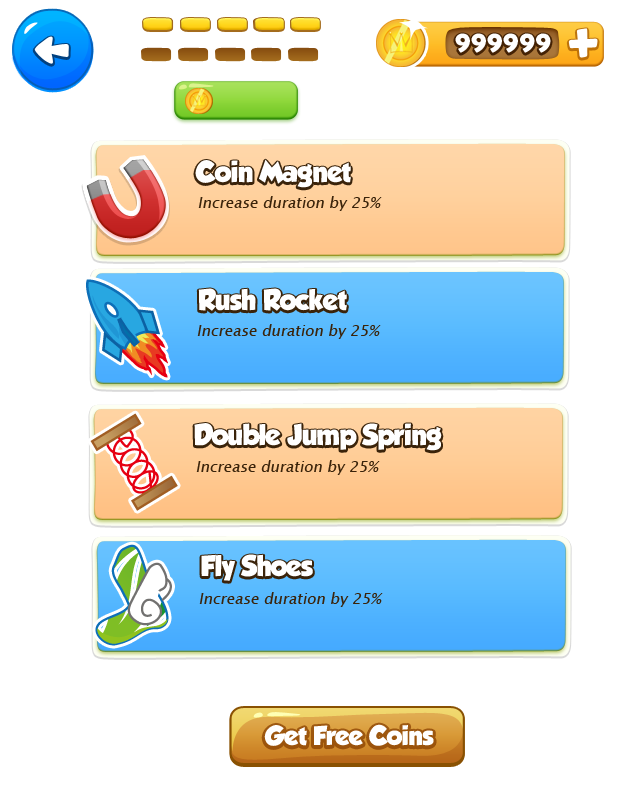
<style>
.page{position:relative;width:640px;height:800px;background:#ffffff}
.page>*{position:absolute;margin:0}
.t1{font:25px "Skranji-Bold";letter-spacing:0.025em;color:#ffffff}
.t2{font:26px "GROBOLD";letter-spacing:-0.02em;color:#ffffff}
.t3{font:15px "LucidaSansUnicode";color:#3a230a;font-style:italic}
.t4{font:24px "GROBOLD";letter-spacing:-0.02em;color:#ffffff}
</style>
<div class="page">
<p class="t1" style="left:455px;top:33px;width:96px;height:20px">999999</p>
<p class="t2" style="left:195px;top:159px;width:156px;height:29px">Coin Magnet</p>
<p class="t3" style="left:198px;top:196px;width:184px;height:15px">Increase duration by 25%</p>
<p class="t2" style="left:198px;top:288px;width:149px;height:23px">Rush Rocket</p>
<p class="t3" style="left:197px;top:324px;width:184px;height:15px">Increase duration by 25%</p>
<p class="t2" style="left:194px;top:423px;width:248px;height:28px">Double Jump Spring</p>
<p class="t3" style="left:196px;top:460px;width:184px;height:15px">Increase duration by 25%</p>
<p class="t2" style="left:201px;top:554px;width:112px;height:27px">Fly Shoes</p>
<p class="t3" style="left:199px;top:592px;width:184px;height:15px">Increase duration by 25%</p>
<p class="t4" style="left:264px;top:724px;width:170px;height:22px">Get Free Coins</p>
</div>
